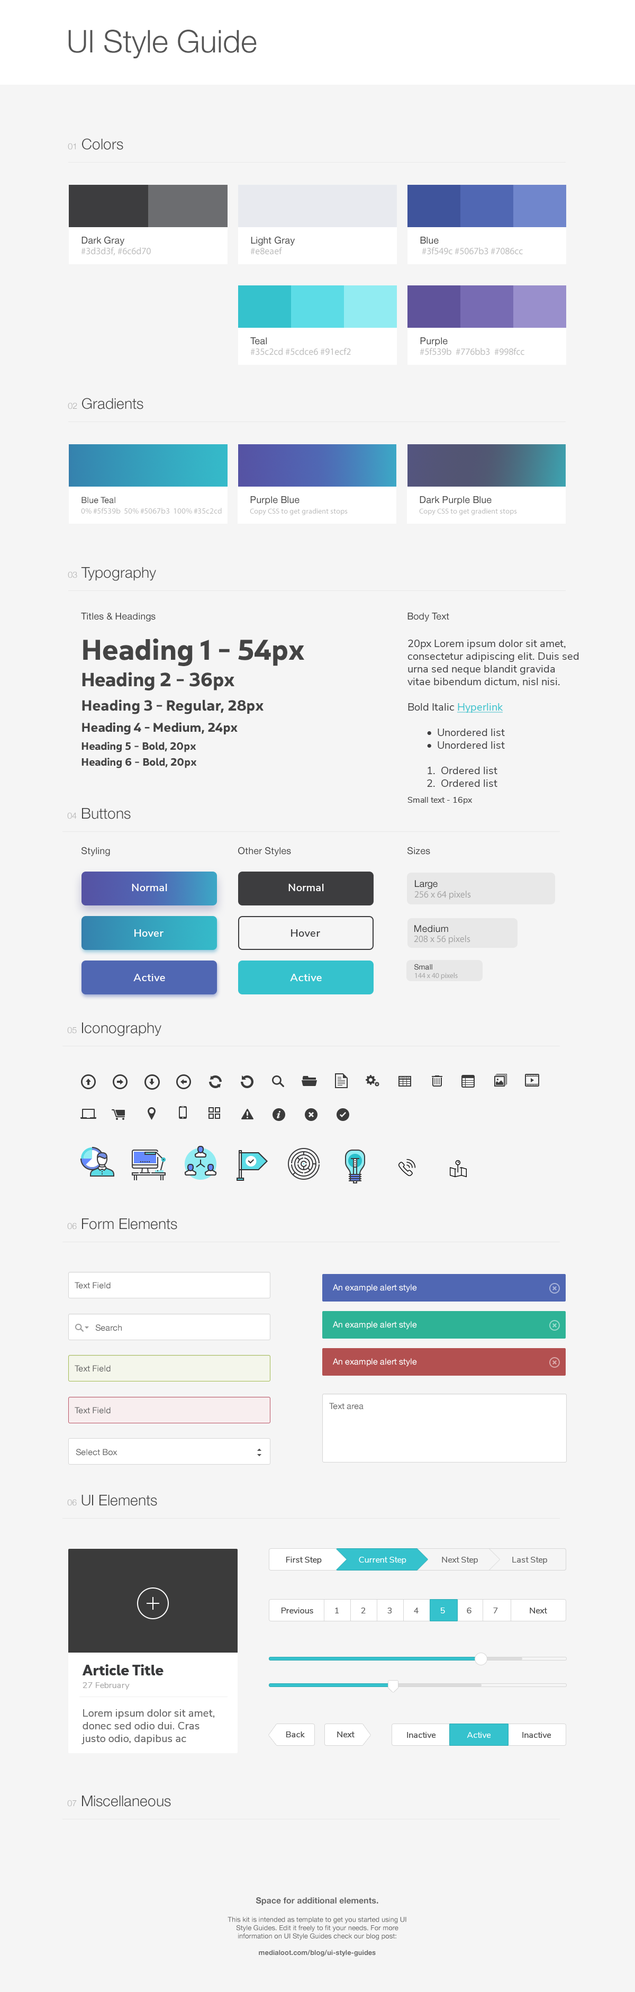
<style>
.page{position:relative;width:635px;height:1992px;background:#f5f5f5}
.page>*{position:absolute;margin:0}
.t1{font:31.2px "HelveticaNeue-Light";color:#555555}
.t2{font:14.8px "HelveticaNeue-Light";color:#444444}
.t3{font:8.5px "HelveticaNeue-Light";color:#aaaaaa}
.t4{font:9.5px/10.6px "MyriadPro-Regular";color:#bbbbbb}
.t5{font:9.5px "HelveticaNeue";color:#444444}
.t6{font:7.9px/10.6px "MyriadPro-Regular";color:#bbbbbb}
.t7{font:8.5px "HelveticaNeue";color:#444444}
.t8{font:7.4px/10.6px "MyriadPro-Regular";color:#bbbbbb}
.t9{font:14.8px/24.4px "Yorkten-NorBol";color:#444444}
.t10{font:28.6px/26.5px "Yorkten-NorBol";color:#444444}
.t11{font:19.1px/26.5px "Yorkten-NorBol";color:#444444}
.t12{font:12.7px/21.2px "Yorkten-NorBol";color:#444444}
.t13{font:10.6px/18px "Yorkten-NorBol";color:#444444}
.t14{font:10.6px/15.9px "Yorkten-NorBol";color:#444444}
.t15{font:10.6px/12.7px "NunitoSans-Regular";color:#3d3d3f}
.t16{font:10.6px/12.7px "NunitoSans-Regular";color:#35c2cd;text-decoration:underline}
.t17{font:8.5px/15.9px "NunitoSans-Regular";color:#444444}
.t18{font:9.5px "HelveticaNeue";color:#3b3b3b}
.t19{font:10.6px "NunitoSans-SemiBold";letter-spacing:0.025em;color:#ffffff}
.t20{font:9.5px "MyriadPro-Regular";color:#a4a4a4}
.t21{font:10.6px "NunitoSans-SemiBold";letter-spacing:0.025em;color:#3d3d3f}
.t22{font:7.4px "HelveticaNeue";color:#3b3b3b}
.t23{font:7.4px "MyriadPro-Regular";color:#a4a4a4}
.t24{font:8.5px "HelveticaNeue";color:#666666}
.t25{font:8.5px "HelveticaNeue";color:#ffffff}
.t26{font:8.5px "NunitoSans-Regular";color:#444444}
.t27{font:8.5px "NunitoSans-Regular";color:#ffffff}
.t28{font:8.5px "NunitoSans-Regular";color:#666666}
.t29{font:14.8px/11.6px "Yorkten-NorBol";color:#393a3c}
.t30{font:8.5px/12.7px "Nunito-Regular";color:#aaaaaa}
.t31{font:10.6px/12.7px "NunitoSans-Regular";color:#666666}
.t32{font:8.5px "NunitoSans-Regular";color:#454545}
.t33{font:6.9px "HelveticaNeue";color:#666666}
.t34{font:8.5px "HelveticaNeue-Bold";color:#666666}
.t35{font:6.9px "HelveticaNeue-Bold";color:#666666}
</style>
<div class="page">
<p class="t1" style="left:68px;top:30px;width:189px;height:29px">UI Style Guide</p>
<p class="t2" style="left:68px;top:138px;width:55px;height:12px"><span class="t3">01</span> Colors</p>
<p class="t4" style="left:81px;top:236px;width:70px;height:20px"><span class="t5">Dark Gray<br></span>#3d3d3f, #6c6d70</p>
<p class="t5" style="left:250px;top:236px;width:45px;height:19px">Light Gray<br><span class="t4">#e8eaef</span></p>
<p class="t4" style="left:420px;top:237px;width:103px;height:18px"><span class="t5">Blue<br></span> #3f549c #5067b3 #7086cc</p>
<p class="t4" style="left:250px;top:337px;width:101px;height:18px"><span class="t5">Teal<br></span>#35c2cd #5cdce6 #91ecf2</p>
<p class="t4" style="left:420px;top:337px;width:105px;height:18px"><span class="t5">Purple<br></span>#5f539b  #776bb3  #998fcc</p>
<p class="t2" style="left:68px;top:398px;width:75px;height:11px"><span class="t3">02</span> Gradients</p>
<p class="t6" style="left:81px;top:497px;width:141px;height:17px"><span class="t7">Blue Teal<br></span>0% #5f539b  50% #5067b3  100% #35c2cd</p>
<p class="t8" style="left:250px;top:496px;width:98px;height:19px"><span class="t5">Purple Blue<br></span>Copy CSS to get gradient stops</p>
<p class="t8" style="left:419px;top:496px;width:98px;height:19px"><span class="t5">Dark Purple Blue<br></span>Copy CSS to get gradient stops</p>
<p class="t2" style="left:68px;top:567px;width:88px;height:14px"><span class="t3">03</span> Typography</p>
<p class="t5" style="left:81px;top:613px;width:75px;height:9px">Titles &amp; Headings</p>
<p class="t5" style="left:408px;top:613px;width:41px;height:9px">Body Text</p>
<p class="t9" style="left:82px;top:638px;width:222px;height:130px"><span class="t10">Heading 1 - 54px<br></span><span class="t11">Heading 2 - 36px<br></span>Heading 3 - Regular, 28px<br><span class="t12">Heading 4 - Medium, 24px<br></span><span class="t13">Heading 5 - Bold, 20px<br></span><span class="t14">Heading 6 - Bold, 20px</span></p>
<p class="t15" style="left:408px;top:640px;width:171px;height:164px">20px Lorem ipsum dolor sit amet, consectetur adipiscing elit. Duis sed urna sed neque blandit gravida vitae bibendum dictum, nisl nisi.<br><br>Bold Italic <span class="t16">Hyperlink <br><br></span> •  Unordered list<br> •  Unordered list<br><br> 1.  Ordered list<br> 2.  Ordered list<br><span class="t17">Small text - 16px</span></p>
<p class="t2" style="left:67px;top:808px;width:64px;height:11px"><span class="t3">04</span> Buttons</p>
<p class="t5" style="left:82px;top:847px;width:28px;height:9px">Styling</p>
<p class="t5" style="left:238px;top:847px;width:53px;height:9px">Other Styles</p>
<p class="t5" style="left:408px;top:847px;width:22px;height:7px">Sizes</p>
<p class="t18" style="left:415px;top:880px;width:23px;height:9px">Large</p>
<p class="t19" style="left:132px;top:884px;width:35px;height:7px">Normal</p>
<p class="t19" style="left:289px;top:884px;width:35px;height:7px">Normal</p>
<p class="t20" style="left:415px;top:890px;width:56px;height:9px">256 x 64 pixels</p>
<p class="t19" style="left:134px;top:929px;width:30px;height:8px">Hover</p>
<p class="t21" style="left:291px;top:929px;width:29px;height:8px">Hover</p>
<p class="t18" style="left:415px;top:925px;width:33px;height:7px">Medium</p>
<p class="t20" style="left:414px;top:935px;width:57px;height:9px">208 x 56 pixels</p>
<p class="t22" style="left:415px;top:964px;width:18px;height:6px">Small</p>
<p class="t19" style="left:133px;top:974px;width:32px;height:7px">Active</p>
<p class="t19" style="left:290px;top:974px;width:32px;height:7px">Active</p>
<p class="t23" style="left:415px;top:973px;width:43px;height:6px">144 x 40 pixels</p>
<p class="t2" style="left:67px;top:1022px;width:94px;height:14px"><span class="t3">05</span> Iconography</p>
<p class="t2" style="left:67px;top:1218px;width:110px;height:11px"><span class="t3">06</span> Form Elements</p>
<p class="t24" style="left:75px;top:1282px;width:36px;height:7px">Text Field</p>
<p class="t25" style="left:333px;top:1284px;width:84px;height:8px">An example alert style</p>
<p class="t24" style="left:95px;top:1324px;width:27px;height:7px">Search</p>
<p class="t25" style="left:333px;top:1321px;width:84px;height:8px">An example alert style</p>
<p class="t25" style="left:333px;top:1358px;width:84px;height:8px">An example alert style</p>
<p class="t24" style="left:75px;top:1365px;width:36px;height:7px">Text Field</p>
<p class="t24" style="left:75px;top:1407px;width:36px;height:7px">Text Field</p>
<p class="t24" style="left:329px;top:1402px;width:35px;height:7px">Text area</p>
<p class="t24" style="left:76px;top:1448px;width:42px;height:7px">Select Box</p>
<p class="t2" style="left:67px;top:1495px;width:90px;height:11px"><span class="t3">06</span> UI Elements</p>
<p class="t26" style="left:286px;top:1556px;width:36px;height:8px">First Step</p>
<p class="t27" style="left:359px;top:1556px;width:48px;height:8px">Current Step</p>
<p class="t28" style="left:442px;top:1556px;width:36px;height:8px">Next Step</p>
<p class="t28" style="left:512px;top:1556px;width:35px;height:8px">Last Step</p>
<p class="t26" style="left:282px;top:1607px;width:31px;height:6px">Previous</p>
<p class="t28" style="left:335px;top:1607px;width:4px;height:6px">1</p>
<p class="t28" style="left:361px;top:1607px;width:5px;height:6px">2</p>
<p class="t28" style="left:388px;top:1607px;width:4px;height:6px">3</p>
<p class="t28" style="left:414px;top:1607px;width:5px;height:6px">4</p>
<p class="t27" style="left:441px;top:1607px;width:4px;height:6px">5</p>
<p class="t28" style="left:467px;top:1607px;width:5px;height:6px">6</p>
<p class="t28" style="left:493px;top:1607px;width:5px;height:6px">7</p>
<p class="t26" style="left:530px;top:1607px;width:17px;height:6px">Next</p>
<p class="t29" style="left:82px;top:1664px;width:82px;height:25px">Article Title<br><span class="t30">27 February</span></p>
<p class="t31" style="left:82px;top:1709px;width:132px;height:35px">Lorem ipsum dolor sit amet, donec sed odio dui. Cras justo odio, dapibus ac facilisis in. Egestas eget quam.</p>
<p class="t32" style="left:286px;top:1731px;width:19px;height:6px">Back</p>
<p class="t32" style="left:337px;top:1731px;width:18px;height:6px">Next</p>
<p class="t32" style="left:407px;top:1732px;width:29px;height:6px">Inactive</p>
<p class="t27" style="left:467px;top:1732px;width:24px;height:6px">Active</p>
<p class="t32" style="left:523px;top:1732px;width:28px;height:6px">Inactive</p>
<p class="t2" style="left:67px;top:1795px;width:104px;height:11px"><span class="t3">07</span> Miscellaneous</p>
<p class="t33" style="left:228px;top:1897px;width:179px;height:59px;text-align:center"><span class="t34">Space for additional elements.<br><br></span>This kit is intended as template to get you started using UI Style Guides. Edit it freely to fit your needs. For more information on UI Style Guides check our blog post:<br><br><span class="t35">medialoot.com/blog/ui-style-guides</span></p>
</div>
